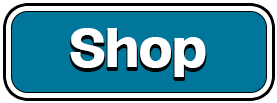
<style>
.page{position:relative;width:277px;height:103px;background:#00769a}
.page>*{position:absolute;margin:0}
.t1{font:52px "Oddlini-ExtraBold";color:#ffffff}
</style>
<div class="page">
<p class="t1" style="left:70px;top:28px;width:136px;height:49px">Shop</p>
</div>
